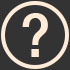
<style>
.page{position:relative;width:70px;height:70px;background:#333333}
.page>*{position:absolute;margin:0}
.t1{font:60.4px "HelveticaNeue-Medium";color:#ffebd7;scale:0.91 1}
</style>
<div class="page">
<p class="t1" style="left:22px;top:13px;width:26px;height:44px">?</p>
</div>
